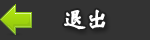
<style>
.page{position:relative;width:150px;height:40px;background:#333333}
.page>*{position:absolute;margin:0}
.t1{font:24px "STXinwei";letter-spacing:-0.05em;color:#ffffff;font-weight:bold}
</style>
<div class="page">
<p class="t1" style="left:64px;top:9px;width:42px;height:21px">退出</p>
</div>
